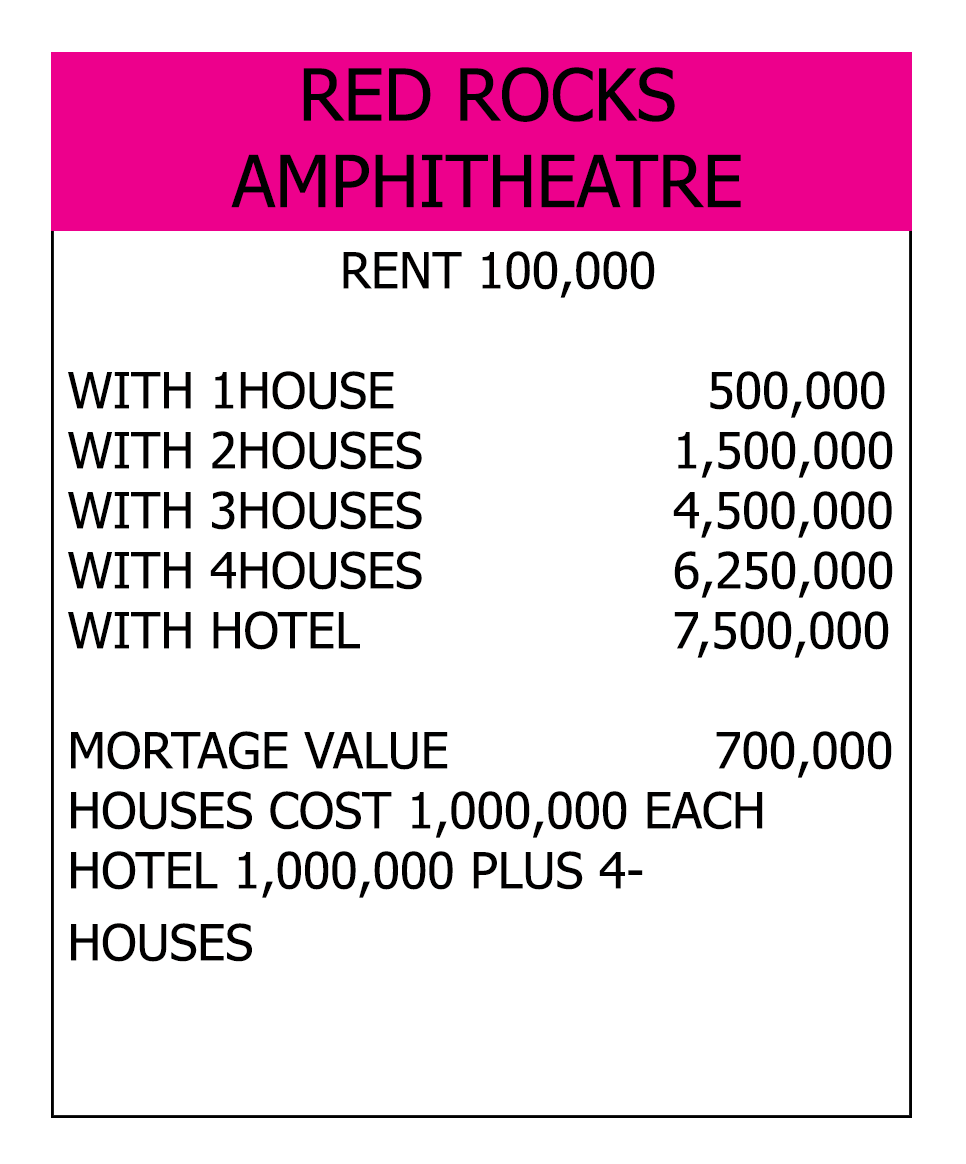
<style>
.page{position:relative;width:966px;height:1164px;background:#ffffff}
.page>*{position:absolute;margin:0}
.t1{font:72px "Tahoma";color:#000000}
.t2{font:50px "Tahoma";color:#010000}
</style>
<div class="page">
<p class="t1" style="left:231px;top:67px;width:510px;height:141px;text-align:center">RED ROCKS <br>AMPHITHEATRE</p>
<p class="t2" style="left:68px;top:251px;width:825px;height:711px;text-align:center">RENT 100,000<br><br>WITH 1HOUSE                    500,000<br>WITH 2HOUSES                1,500,000<br>WITH 3HOUSES                4,500,000<br>WITH 4HOUSES                6,250,000<br>WITH HOTEL                    7,500,000<br><br>MORTAGE VALUE                 700,000<br>HOUSES COST 1,000,000 EACH<br>HOTEL 1,000,000 PLUS 4-<br>HOUSES</p>
</div>
